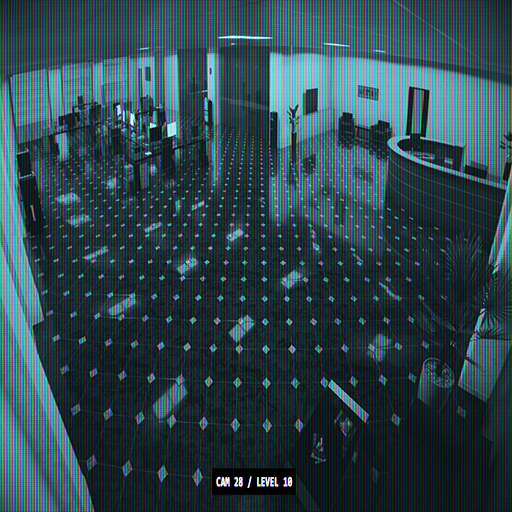
<style>
.page{position:relative;width:512px;height:512px}
.page>*{position:absolute;margin:0}
.t1{font:13.7px "Consolas-Bold";color:#ffffff;font-weight:bold;scale:0.56 1}
</style>
<div class="page">
<p class="t1" style="left:216px;top:476px;width:77px;height:12px">CAM 28 / LEVEL 10</p>
</div>
